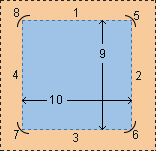
<style>
.page{position:relative;width:156px;height:151px;background:#9ec3e6}
.page>*{position:absolute;margin:0}
.t1{font:12px "ArialMT";color:#052128}
.t2{font:12px "ArialMT";color:#000000}
</style>
<div class="page">
<p class="t1" style="left:14px;top:8px;width:5px;height:9px">8</p>
<p class="t1" style="left:74px;top:8px;width:3px;height:9px">1</p>
<p class="t1" style="left:134px;top:11px;width:5px;height:9px">5</p>
<p class="t2" style="left:100px;top:49px;width:5px;height:9px">9</p>
<p class="t1" style="left:13px;top:70px;width:5px;height:9px">4</p>
<p class="t1" style="left:136px;top:71px;width:5px;height:9px">2</p>
<p class="t2" style="left:50px;top:95px;width:12px;height:9px">10</p>
<p class="t1" style="left:14px;top:130px;width:5px;height:9px">7</p>
<p class="t1" style="left:73px;top:133px;width:5px;height:9px">3</p>
<p class="t1" style="left:133px;top:130px;width:5px;height:9px">6</p>
</div>
